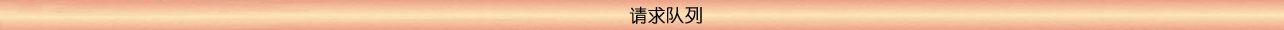
<style>
.page{position:relative;width:1284px;height:30px}
.page>*{position:absolute;margin:0}
.t1{font:18px "YouYuan";color:#000000;font-weight:bold}
</style>
<div class="page">
<p class="t1" style="left:629px;top:6px;width:73px;height:18px">请求队列</p>
</div>
